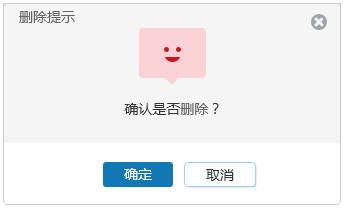
<style>
.page{position:relative;width:343px;height:208px;background:#f5f5f5}
.page>*{position:absolute;margin:0}
.t1{font:14px "MicrosoftYaHei";color:#666666}
.t2{font:14px "MicrosoftYaHei";color:#333333}
.t3{font:14px "MicrosoftYaHei";color:#ffffff}
</style>
<div class="page">
<p class="t1" style="left:19px;top:11px;width:56px;height:12px">删除提示</p>
<p class="t2" style="left:124px;top:103px;width:95px;height:12px">确认是否<span class="t1">删除</span>？</p>
<p class="t3" style="left:124px;top:168px;width:28px;height:12px">确定</p>
<p class="t2" style="left:206px;top:169px;width:28px;height:12px">取消</p>
</div>
